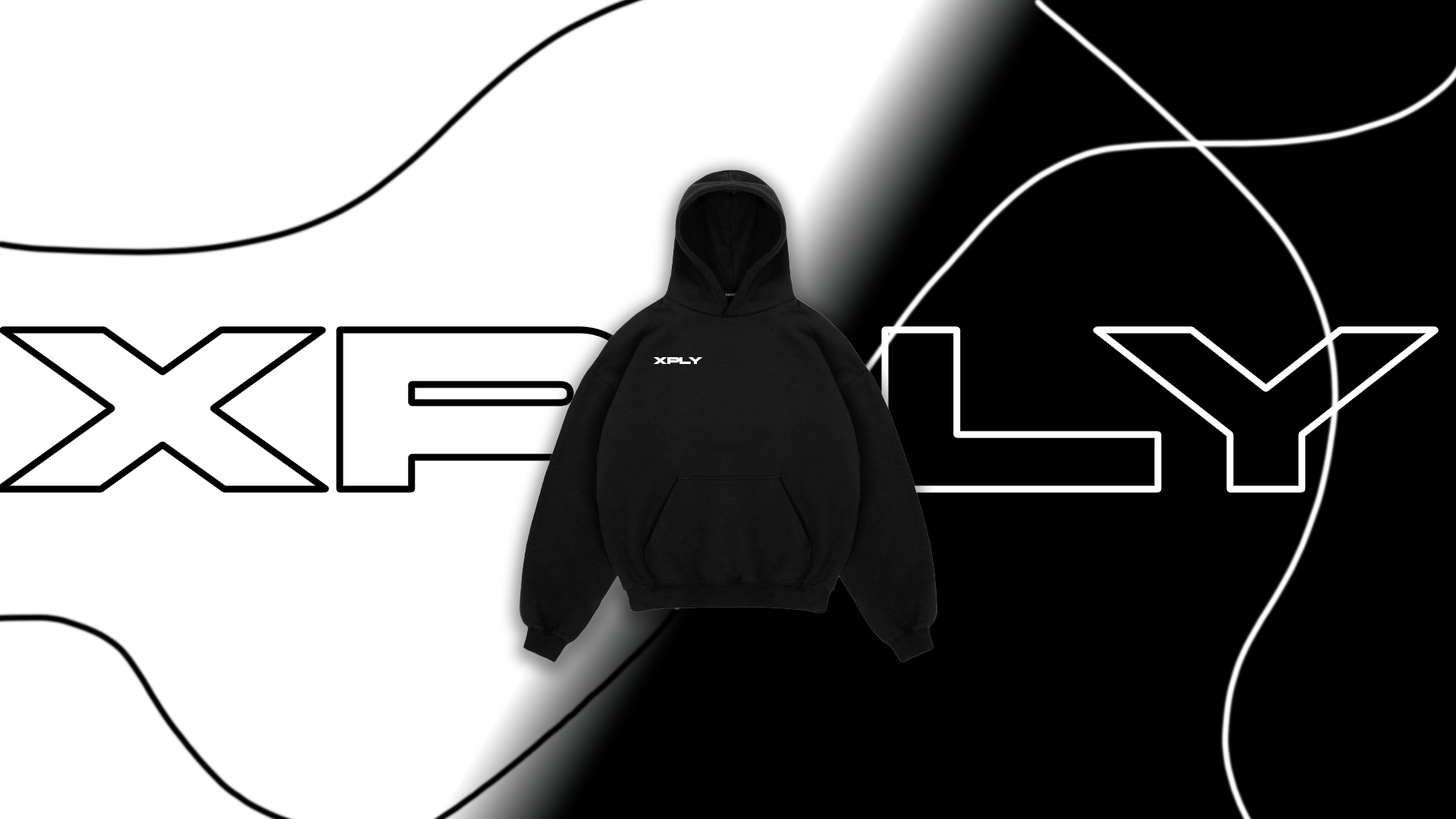
<style>
.page{position:relative;width:1456px;height:819px;background:#ffffff}
.page>*{position:absolute;margin:0}
.t1{font:9.1px "AKONY-Bold";color:#ffffff}
</style>
<div class="page">
<p class="t1" style="left:654px;top:357px;width:48px;height:7px">XPLY</p>
</div>
